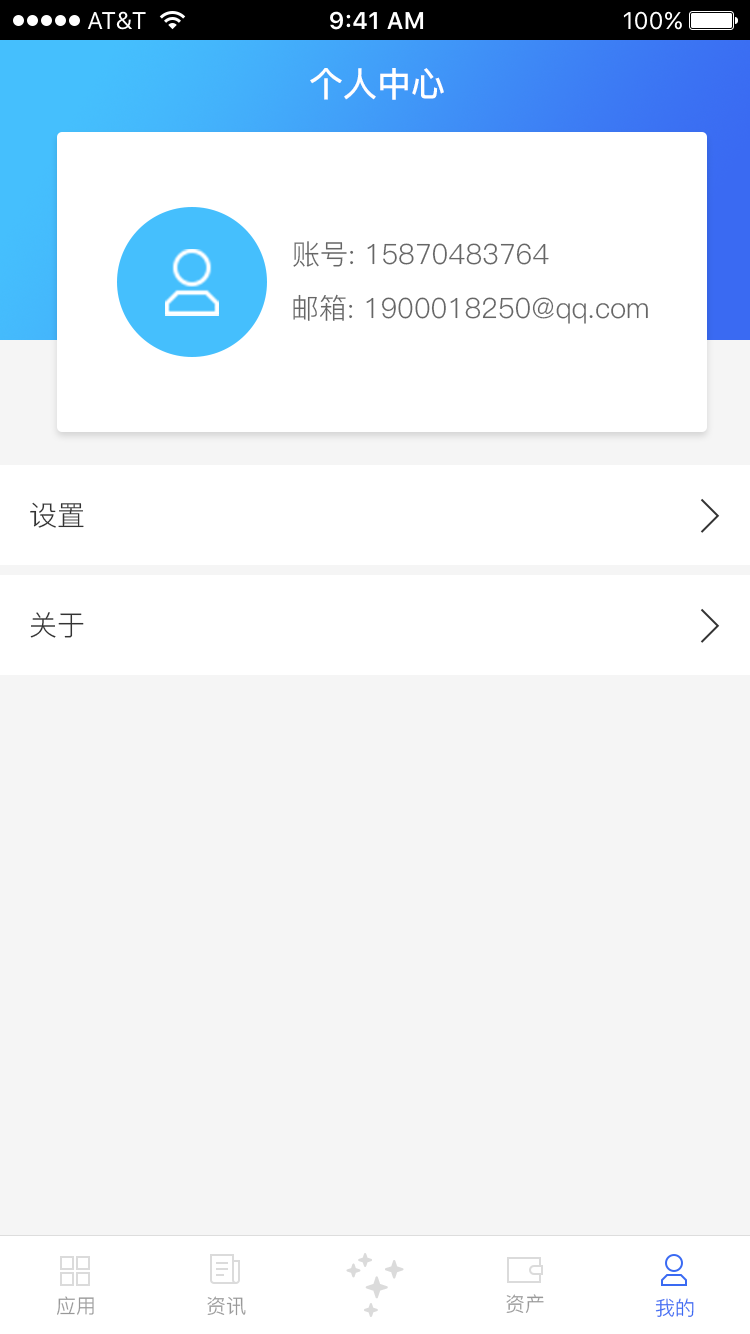
<style>
.page{position:relative;width:750px;height:1334px;background:#f5f5f5}
.page>*{position:absolute;margin:0}
.t1{font:34px "PingFang-SC-Bold";color:#ffffff}
.t2{font:28px "PingFang-SC-Regular";color:#666666}
.t3{font:28px "PingFang-SC-Regular";color:#333333}
.t4{font:20px "PingFang-SC-Regular";color:#999999}
.t5{font:20px "PingFang-SC-Regular";color:#3a6af2}
</style>
<div class="page">
<p class="t1" style="left:310px;top:68px;width:134px;height:32px">个人中心</p>
<p class="t2" style="left:293px;top:241px;width:256px;height:26px">账号: 15870483764</p>
<p class="t2" style="left:293px;top:294px;width:355px;height:30px">邮箱: 1900018250@qq.com</p>
<p class="t3" style="left:30px;top:502px;width:54px;height:26px">设置</p>
<p class="t3" style="left:30px;top:612px;width:54px;height:26px">关于</p>
<p class="t4" style="left:57px;top:1296px;width:37px;height:19px">应用</p>
<p class="t4" style="left:207px;top:1296px;width:39px;height:20px">资讯</p>
<p class="t4" style="left:506px;top:1294px;width:38px;height:19px">资产</p>
<p class="t5" style="left:655px;top:1298px;width:39px;height:19px">我的</p>
</div>
